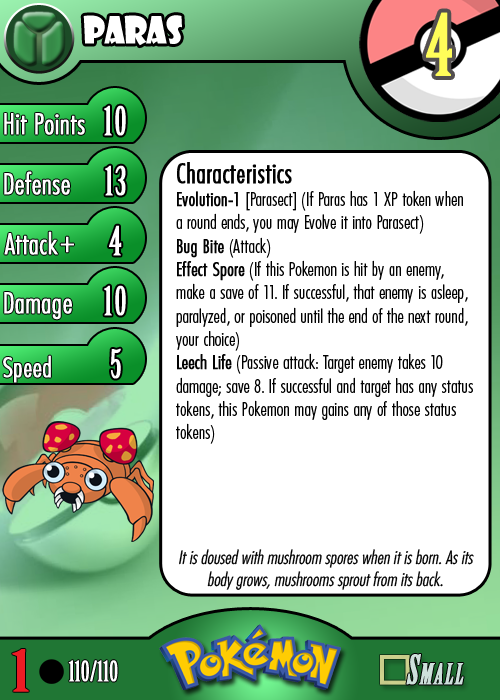
<style>
.page{position:relative;width:500px;height:700px;background:#ffffff}
.page>*{position:absolute;margin:0}
.t1{font:36.7px "ShowcardGothic-Reg";letter-spacing:-0.025em;color:#ffffff;scale:0.91 1}
.t2{font:83.3px "BirchStd";letter-spacing:0.025em;color:#fffd59;font-weight:bold}
.t3{font:27.8px "Futura-CondensedLight";color:#ffffff;font-weight:bold}
.t4{font:38.9px "BirchStd";letter-spacing:0.035em;color:#ffffff;font-weight:bold}
.t5{font:19.4px "FuturaCondensedBQ-Light";color:#010101}
.t6{font:27.8px "FuturaCondensedBQ-Light";color:#010101;font-weight:bold}
.t7{font:19.4px "FuturaCondensedBQ-Light";color:#010101;font-weight:bold}
.t8{font:30.6px "Futura-CondensedLight";color:#ffffff;font-weight:bold}
.t9{font:27.8px "FuturaCondensedBQ-Light";color:#ffffff;font-weight:bold}
.t10{font:18.1px "Futura-CondensedLight";color:#010101;font-style:italic}
.t11{font:55.6px "BirchStd";color:#ed1c24;font-weight:bold;scale:1.5 1}
.t12{font:27.8px "BirchStd";color:#ffffff;font-weight:bold}
</style>
<div class="page">
<p class="t1" style="left:83px;top:15px;width:99px;height:31px">paras</p>
<p class="t2" style="left:426px;top:12px;width:26px;height:64px">4</p>
<p class="t3" style="left:4px;top:113px;width:81px;height:22px">Hit Points</p>
<p class="t4" style="left:104px;top:105px;width:22px;height:31px">10</p>
<p class="t3" style="left:4px;top:171px;width:66px;height:24px">Defense</p>
<p class="t4" style="left:105px;top:165px;width:21px;height:31px">13</p>
<p class="t5" style="left:176px;top:162px;width:297px;height:282px"><span class="t6">Characteristics<br></span><span class="t7">Evolution-1 </span>[Parasect] (If Paras has 1 XP token when a round ends, you may Evolve it into Parasect)<br><span class="t7">Bug Bite</span> (Attack)<br><span class="t7">Effect Spore</span> (If this Pokemon is hit by an enemy, make a save of 11. If successful, that enemy is asleep, paralyzed, or poisoned until the end of the next round, your choice)<br><span class="t7">Leech Life</span> (Passive attack: Target enemy takes 10 damage; save 8. If successful and target has any status tokens, this Pokemon may gains any of those status tokens)</p>
<p class="t3" style="left:4px;top:231px;width:54px;height:24px">Attack</p>
<p class="t4" style="left:109px;top:225px;width:13px;height:31px">4</p>
<p class="t8" style="left:60px;top:236px;width:14px;height:17px">+</p>
<p class="t3" style="left:4px;top:292px;width:68px;height:28px">Damage</p>
<p class="t4" style="left:104px;top:285px;width:22px;height:31px">10</p>
<p class="t4" style="left:111px;top:348px;width:10px;height:31px">5</p>
<p class="t9" style="left:3px;top:355px;width:48px;height:28px">Speed</p>
<p class="t10" style="left:179px;top:549px;width:295px;height:41px;text-align:center">It is doused with mushroom spores when it is born. As its body grows, mushrooms sprout from its back.</p>
<p class="t11" style="left:12px;top:649px;width:17px;height:43px">1</p>
<p class="t12" style="left:68px;top:660px;width:50px;height:22px">110/110</p>
</div>
